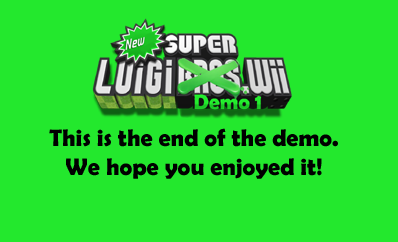
<style>
.page{position:relative;width:398px;height:242px;background:#23e82d}
.page>*{position:absolute;margin:0}
.t1{font:24px "BerlinSansFBDemi-Bold";color:#000000}
</style>
<div class="page">
<p class="t1" style="left:49px;top:128px;width:289px;height:51px;text-align:center">This is the end of the demo. <br>We hope you enjoyed it!</p>
</div>
